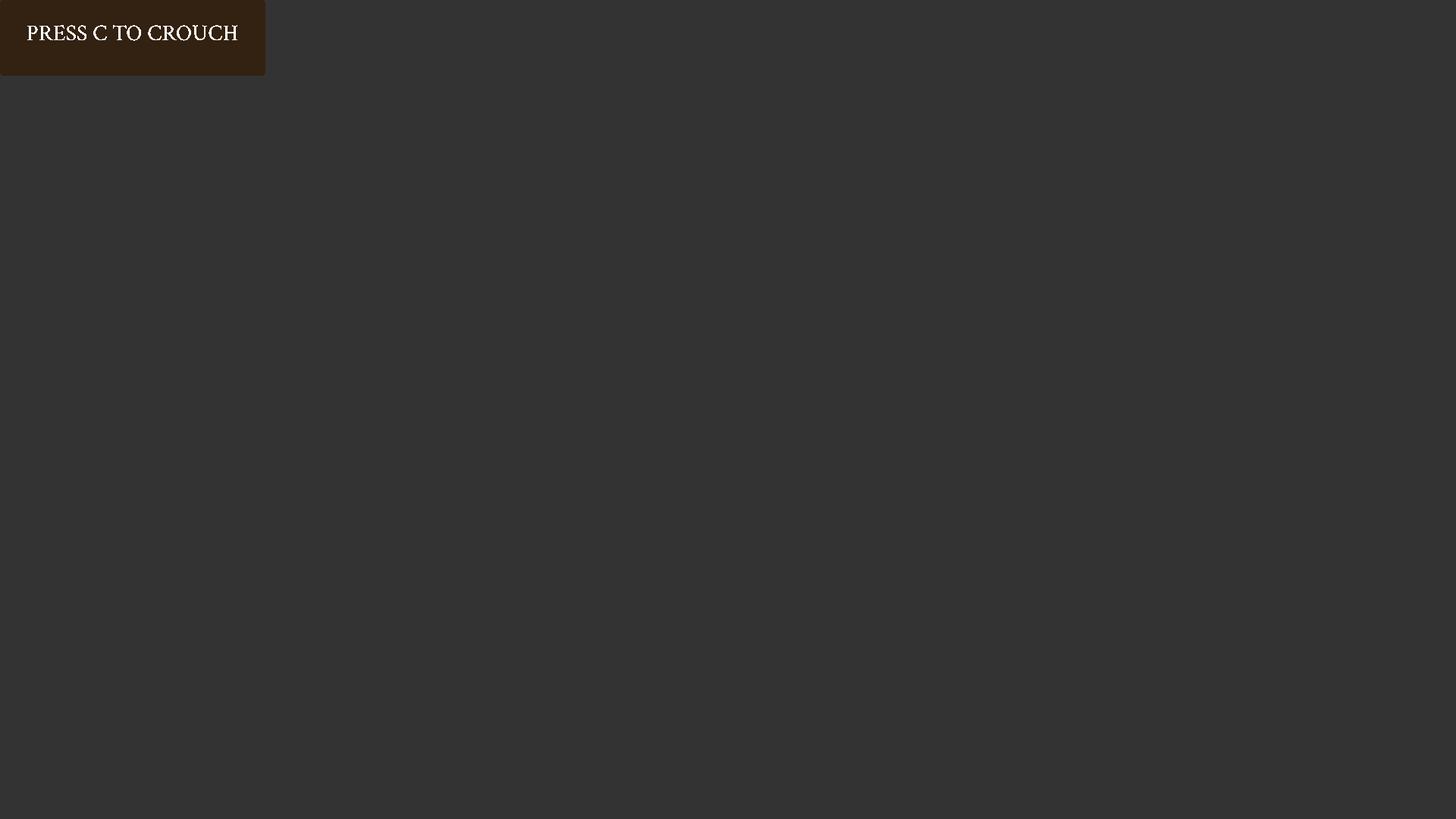
<style>
.page{position:relative;width:1456px;height:819px;background:#333333}
.page>*{position:absolute;margin:0}
.t1{font:22.7px "CrimsonText-Regular";color:#ffffff}
</style>
<div class="page">
<p class="t1" style="left:27px;top:25px;width:211px;height:16px">PRESS C TO CROUCH</p>
</div>
